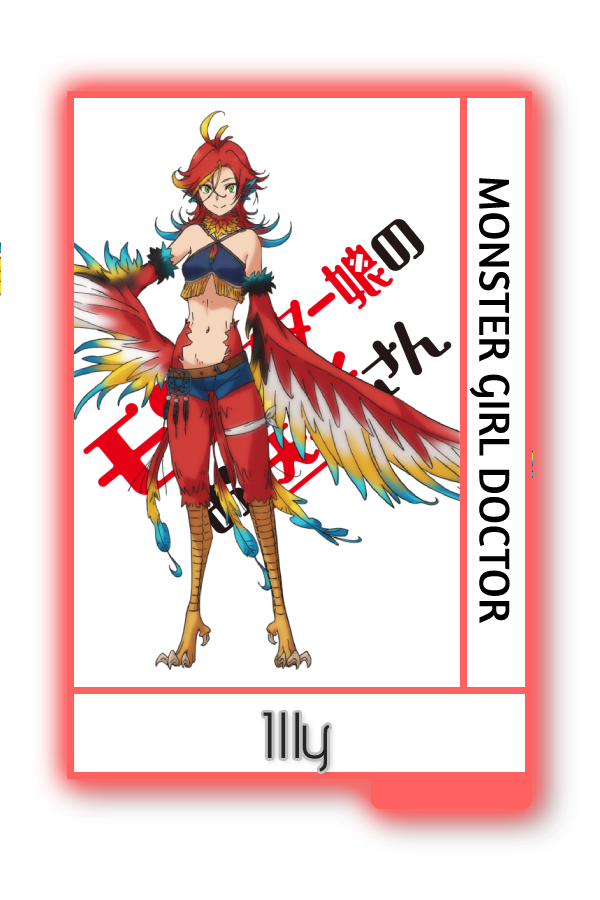
<style>
.page{position:relative;width:600px;height:900px;background:#ffffff}
.page>*{position:absolute;margin:0}
.t1{font:44px "Amaranth-Regular";color:#000000}
.t2{font:65px "AdventPro-Regular";color:#252525}
</style>
<div class="page">
<p class="t1" style="left:469px;top:178px;width:41px;height:446px;rotate:90deg">MONSTER GIRL DOCTOR</p>
<p class="t2" style="left:263px;top:712px;width:67px;height:60px">Illy</p>
</div>
